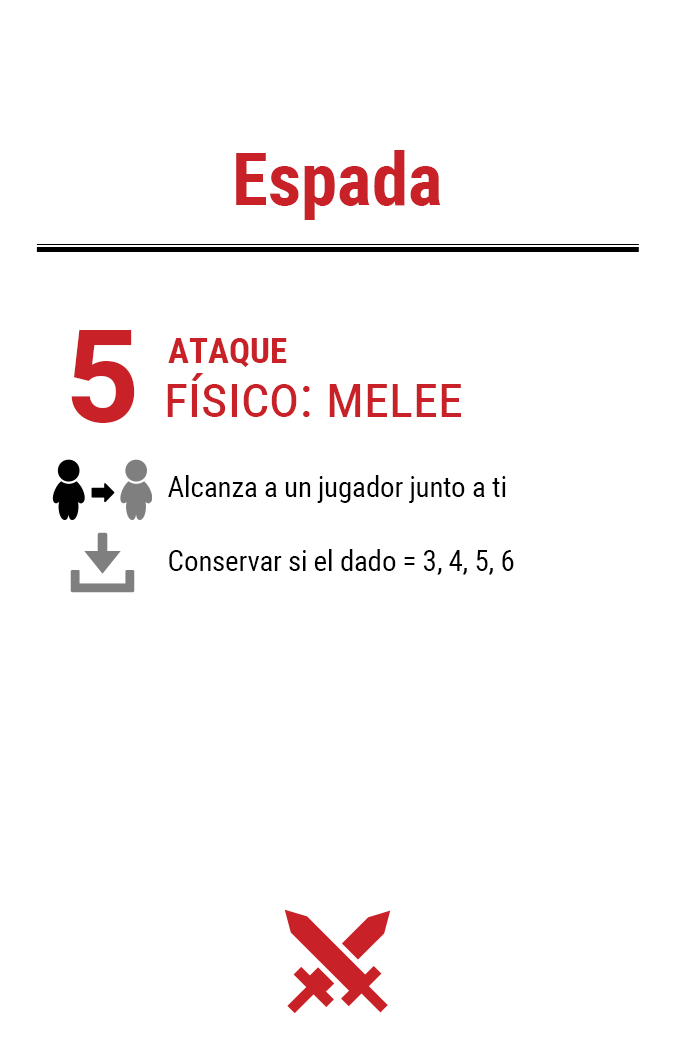
<style>
.page{position:relative;width:675px;height:1050px;background:#ffffff}
.page>*{position:absolute;margin:0}
.t1{font:72.9px "RobotoCondensed-Bold";color:#c82127}
.t2{font:130px "Roboto-Bold";letter-spacing:-0.06em;color:#c82127}
.t3{font:35px "RobotoCondensed-Bold";color:#c82127}
.t4{font:58.3px "RobotoCondensed-Regular";color:#c82127;font-variant:small-caps}
.t5{font:29.2px "RobotoCondensed-Regular";letter-spacing:-0.01em;color:#000000}
</style>
<div class="page">
<p class="t1" style="left:236px;top:150px;width:205px;height:70px">Espada</p>
<p class="t2" style="left:71px;top:330px;width:64px;height:93px">5</p>
<p class="t3" style="left:168px;top:338px;width:119px;height:29px">ATAQUE</p>
<p class="t4" style="left:167px;top:373px;width:294px;height:44px">físico: melee</p>
<p class="t5" style="left:168px;top:475px;width:338px;height:28px">Alcanza a un jugador junto a ti</p>
<p class="t5" style="left:169px;top:549px;width:345px;height:26px">Conservar si el dado = 3, 4, 5, 6</p>
</div>
